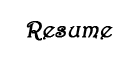
<style>
.page{position:relative;width:139px;height:61px;background:#ffffff}
.page>*{position:absolute;margin:0}
.t1{font:24px "Harrington";color:#000000;font-weight:bold;font-style:italic}
</style>
<div class="page">
<p class="t1" style="left:26px;top:21px;width:87px;height:20px">Resume</p>
</div>
